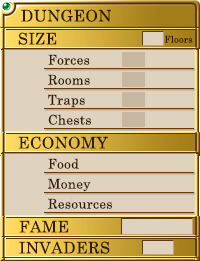
<style>
.page{position:relative;width:200px;height:261px;background:#dfd3c0}
.page>*{position:absolute;margin:0}
.t1{font:16px "CenturySchoolbook";letter-spacing:0.025em;color:#321a02}
.t2{font:9.3px "CenturySchoolbook";letter-spacing:0.025em;color:#321a02}
.t3{font:13.3px "CenturySchoolbook";letter-spacing:0.025em;color:#321a02}
</style>
<div class="page">
<p class="t1" style="left:21px;top:9px;width:90px;height:13px">DUNGEON</p>
<p class="t1" style="left:18px;top:32px;width:39px;height:13px">SIZE</p>
<p class="t2" style="left:164px;top:35px;width:29px;height:8px">Floors</p>
<p class="t3" style="left:48px;top:54px;width:42px;height:11px">Forces</p>
<p class="t3" style="left:48px;top:74px;width:42px;height:11px">Rooms</p>
<p class="t3" style="left:48px;top:94px;width:37px;height:14px">Traps</p>
<p class="t3" style="left:48px;top:114px;width:43px;height:11px">Chests</p>
<p class="t1" style="left:18px;top:136px;width:90px;height:13px">ECONOMY</p>
<p class="t3" style="left:48px;top:158px;width:31px;height:11px">Food</p>
<p class="t3" style="left:48px;top:178px;width:43px;height:14px">Money</p>
<p class="t3" style="left:48px;top:198px;width:64px;height:11px">Resources</p>
<p class="t1" style="left:19px;top:220px;width:50px;height:13px">FAME</p>
<p class="t1" style="left:19px;top:241px;width:91px;height:13px">INVADERS</p>
</div>
